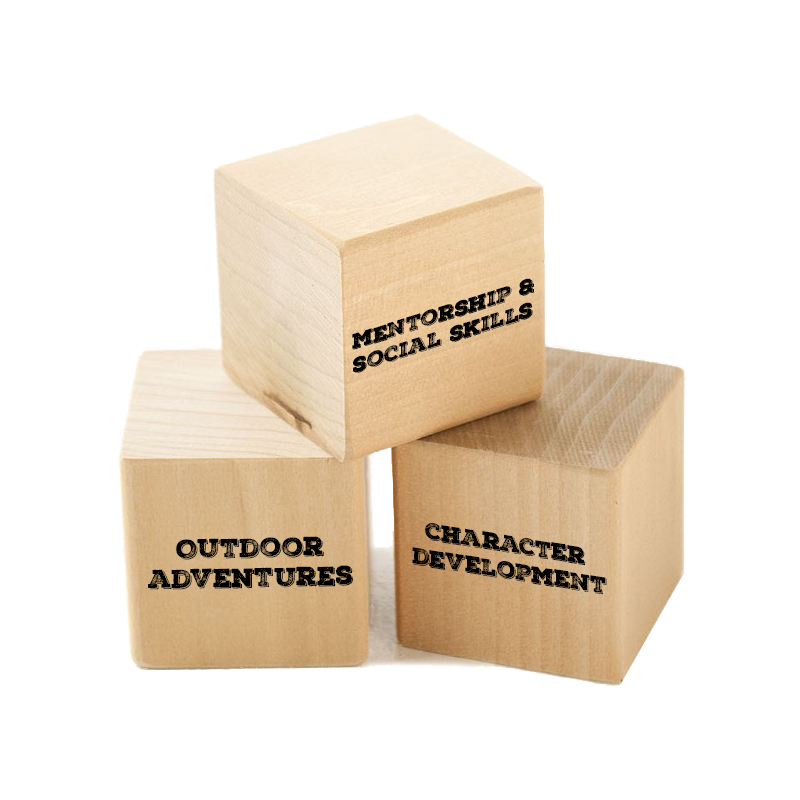
<style>
.page{position:relative;width:800px;height:800px;background:#ffffff}
.page>*{position:absolute;margin:0}
.t1{font:20px "NexaRustSlab-BlackShadow03";color:#000000;scale:1.05 1}
.t2{font:22px "NexaRustSlab-BlackShadow03";color:#010101}
.t3{font:24.9px "NexaRustSlab-BlackShadow03";color:#000000}
</style>
<div class="page">
<p class="t1" style="left:352px;top:278px;width:182px;height:95px;text-align:center;rotate:-17deg">mentorship &amp;<br>social skills</p>
<p class="t2" style="left:412px;top:523px;width:195px;height:72px;text-align:center;rotate:9deg">character <br>development</p>
<p class="t3" style="left:148px;top:536px;width:205px;height:54px;text-align:center;rotate:-1deg">Outdoor<br>adventures</p>
</div>
